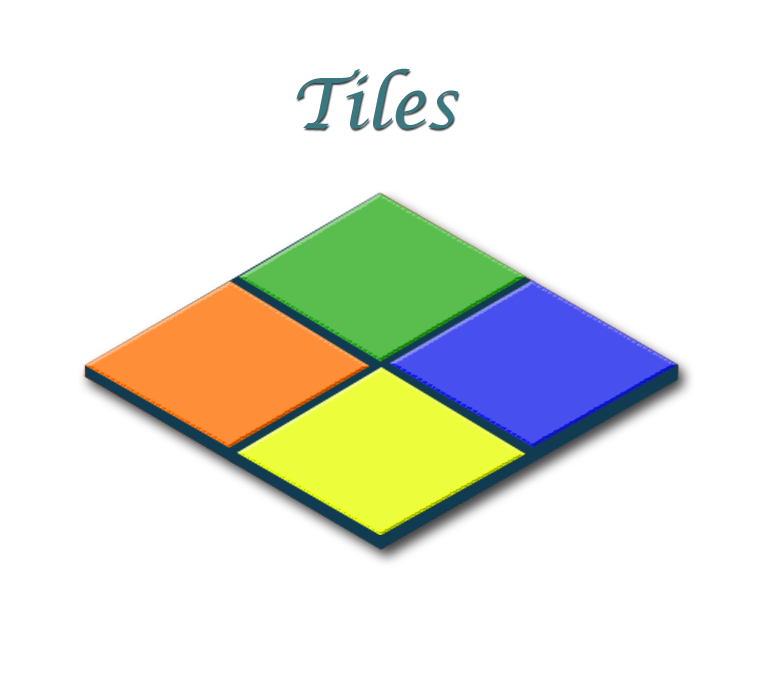
<style>
.page{position:relative;width:775px;height:690px;background:#ffffff}
.page>*{position:absolute;margin:0}
.t1{font:69.3px "LucidaCalligraphy-Italic";color:#3a777f}
</style>
<div class="page">
<p class="t1" style="left:296px;top:68px;width:163px;height:61px">Tiles</p>
</div>
